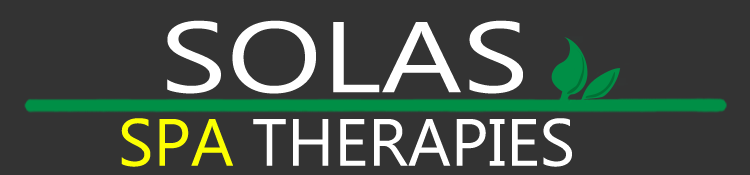
<style>
.page{position:relative;width:750px;height:175px;background:#333333}
.page>*{position:absolute;margin:0}
.t1{font:100.2px "LaoUI";color:#ffffff;scale:1.26 1}
.t2{font:66.7px "LaoUI";color:#ffffff}
.t3{font:66.7px "LaoUI";color:#fcff02}
</style>
<div class="page">
<p class="t1" style="left:167px;top:20px;width:356px;height:74px">SOLAS</p>
<p class="t2" style="left:121px;top:118px;width:451px;height:49px"><span class="t3">SPA </span>THERAPIES</p>
</div>
